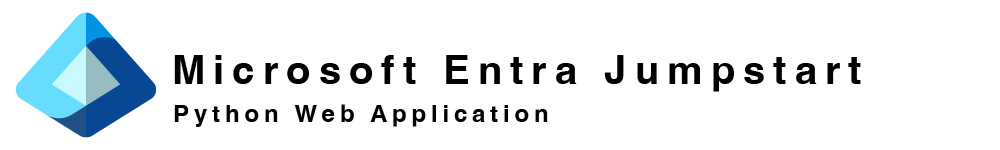
<style>
.page{position:relative;width:1000px;height:150px;background:#ffffff}
.page>*{position:absolute;margin:0}
.t1{font:40px "Helvetica-Bold";letter-spacing:0.2em;color:#000000}
.t2{font:24px "Helvetica-Bold";letter-spacing:0.2em;color:#000000}
</style>
<div class="page">
<p class="t1" style="left:174px;top:55px;width:687px;height:37px">Microsoft Entra Jumpstart</p>
<p class="t2" style="left:174px;top:104px;width:374px;height:23px">Python Web Application</p>
</div>
